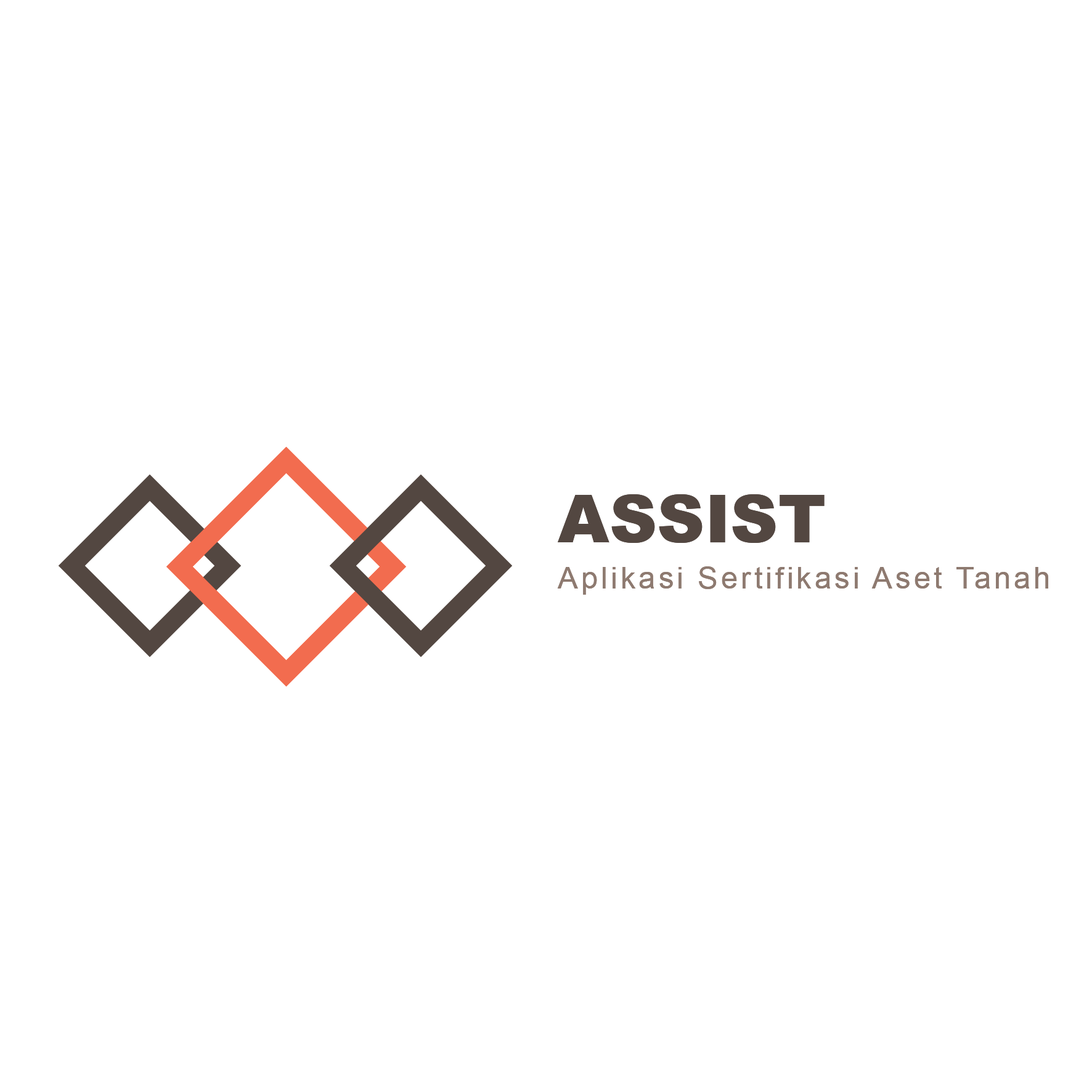
<style>
.page{position:relative;width:1092px;height:1092px;background:#ffffff}
.page>*{position:absolute;margin:0}
.t1{font:66.3px "Arial-Black";color:#534741}
.t2{font:30.4px "ArialMT";letter-spacing:0.1em;color:#8e7a70}
</style>
<div class="page">
<p class="t1" style="left:558px;top:494px;width:267px;height:49px">ASSIST</p>
<p class="t2" style="left:557px;top:566px;width:491px;height:29px">Aplikasi Sertifikasi Aset Tanah</p>
</div>
